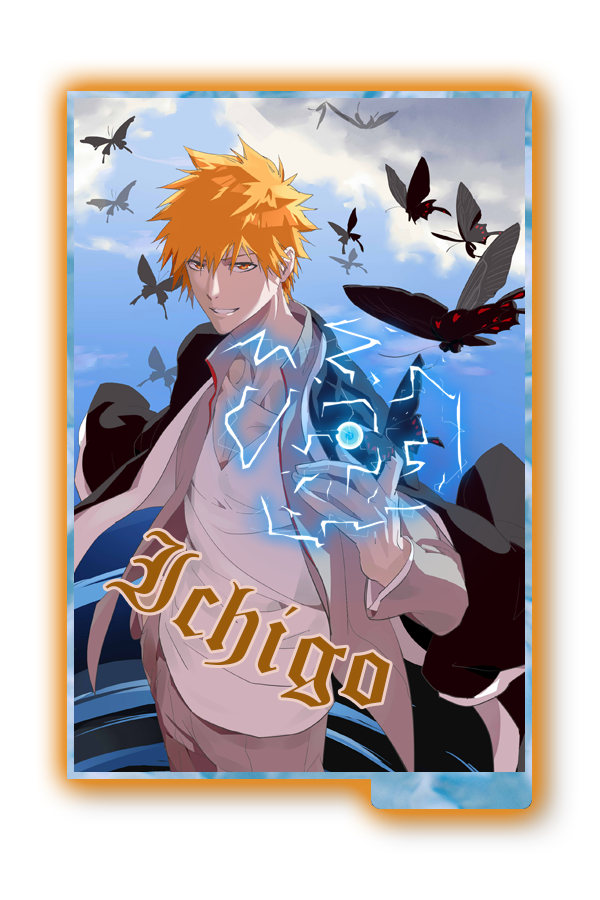
<style>
.page{position:relative;width:600px;height:900px;background:#ffffff}
.page>*{position:absolute;margin:0}
.t1{font:104.2px "OldEnglishTextMT";color:#9a5b0a}
</style>
<div class="page">
<p class="t1" style="left:105px;top:530px;width:285px;height:177px;rotate:24deg">Ichigo</p>
</div>
